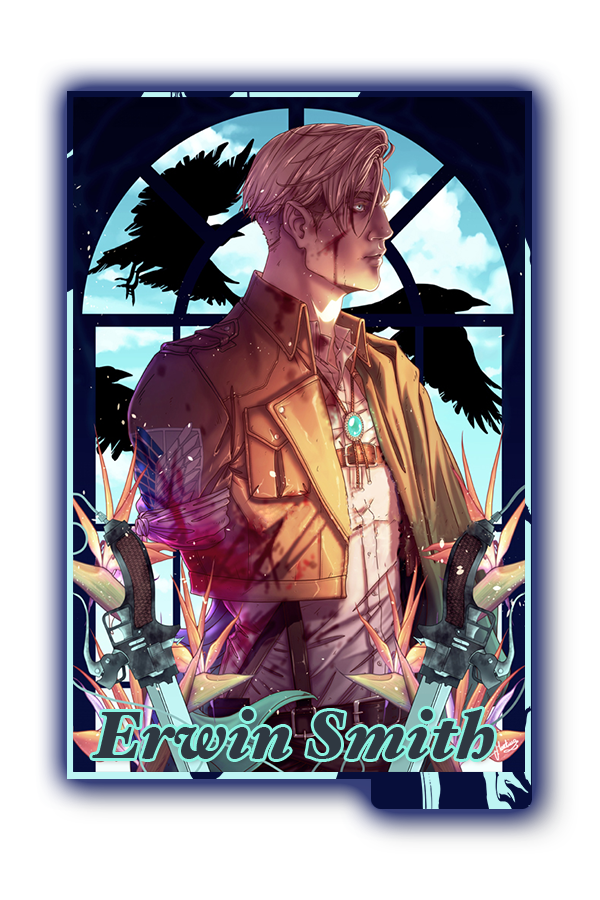
<style>
.page{position:relative;width:600px;height:900px;background:#ffffff}
.page>*{position:absolute;margin:0}
.t1{font:66.7px "HoeflerText-BlackItalic";color:#2f3841}
</style>
<div class="page">
<p class="t1" style="left:92px;top:709px;width:402px;height:50px">Erwin Smith</p>
</div>
